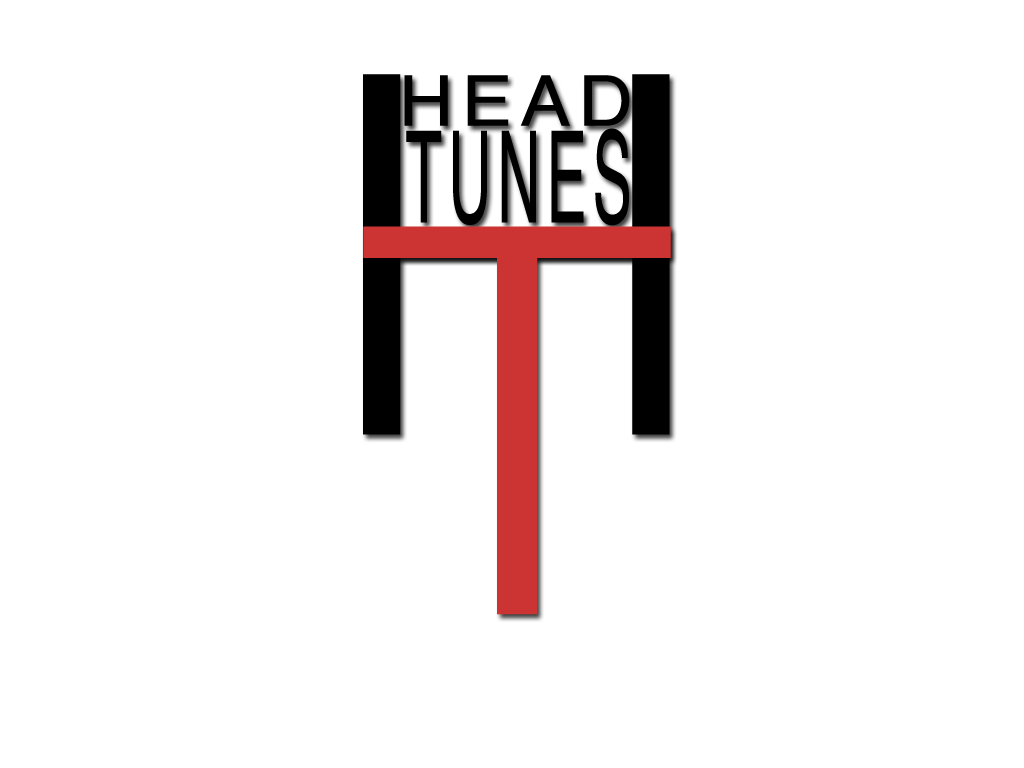
<style>
.page{position:relative;width:1024px;height:768px;background:#ffffff}
.page>*{position:absolute;margin:0}
.t1{font:500px "Helvetica-Light";letter-spacing:0.1em;color:#000000;scale:1.09 1}
.t2{font:70px "Helvetica";letter-spacing:0.1em;color:#000000;scale:1.09 1}
.t3{font:127.6px "Helvetica";letter-spacing:0.1em;color:#000000;scale:0.47 1}
</style>
<div class="page">
<p class="t1" style="left:363px;top:74px;width:307px;height:361px">H</p>
<p class="t2" style="left:404px;top:75px;width:226px;height:51px">HEAD</p>
<p class="t3" style="left:406px;top:128px;width:223px;height:98px">TUNES</p>
</div>
